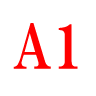
<style>
.page{position:relative;width:96px;height:96px;background:#ffffff}
.page>*{position:absolute;margin:0}
.t1{font:60px "HGSMinchoE";color:#ff0000}
</style>
<div class="page">
<p class="t1" style="left:13px;top:23px;width:65px;height:46px">A1</p>
</div>
